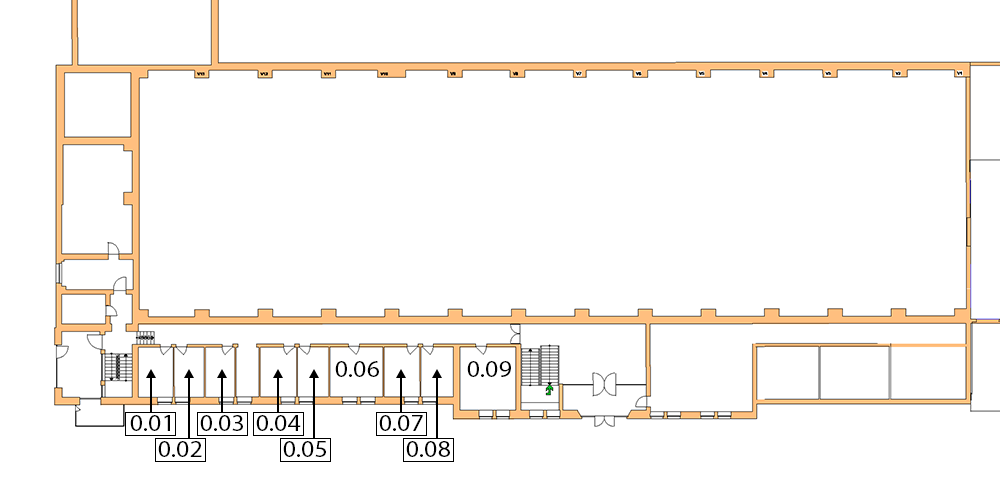
<style>
.page{position:relative;width:1000px;height:480px;background:#ffffff}
.page>*{position:absolute;margin:0}
.t1{font:23.3px "MyriadPro-Regular";color:#000000;scale:1.11 1}
</style>
<div class="page">
<p class="t1" style="left:335px;top:361px;width:44px;height:16px">0.06</p>
<p class="t1" style="left:467px;top:361px;width:44px;height:16px">0.09</p>
<p class="t1" style="left:130px;top:415px;width:40px;height:16px">0.01</p>
<p class="t1" style="left:200px;top:415px;width:43px;height:16px">0.03</p>
<p class="t1" style="left:256px;top:415px;width:45px;height:16px">0.04</p>
<p class="t1" style="left:379px;top:415px;width:44px;height:16px">0.07</p>
<p class="t1" style="left:158px;top:441px;width:44px;height:16px">0.02</p>
<p class="t1" style="left:283px;top:441px;width:43px;height:16px">0.05</p>
<p class="t1" style="left:406px;top:441px;width:44px;height:16px">0.08</p>
</div>
